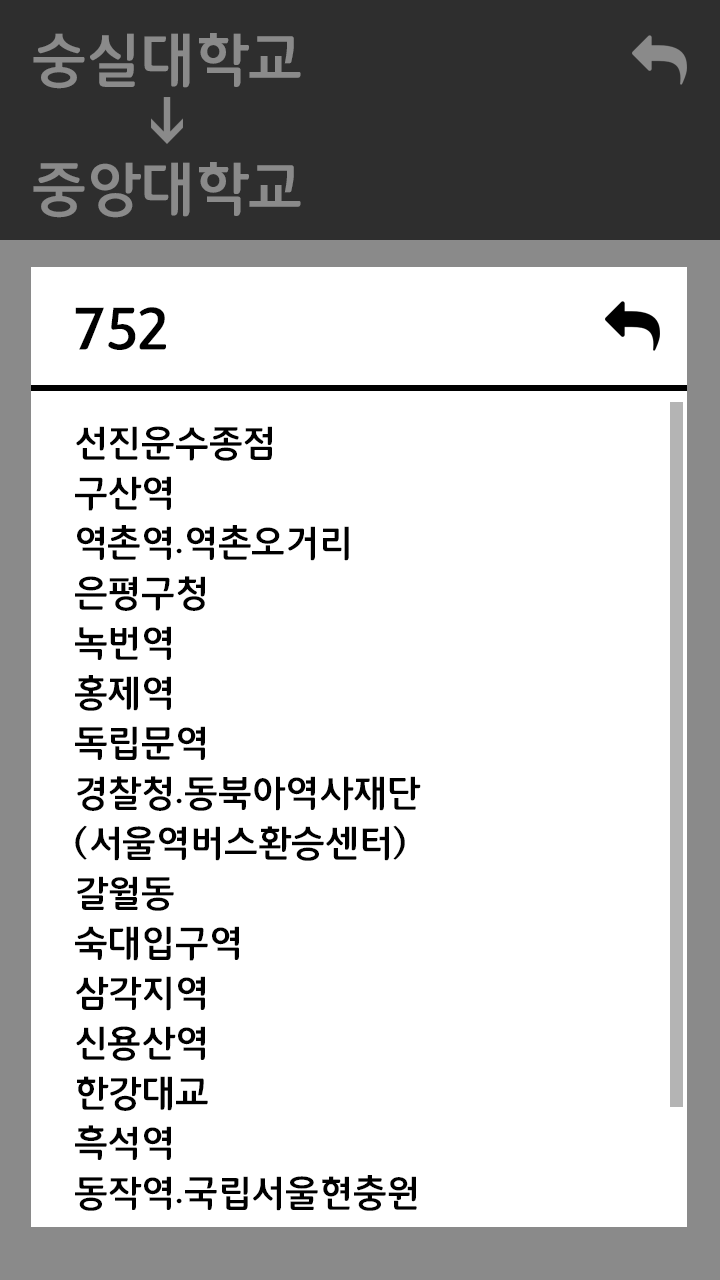
<style>
.page{position:relative;width:720px;height:1280px;background:#ffffff}
.page>*{position:absolute;margin:0}
.t1{font:60px "12LotteMartDreamBold";color:#8a8a8a}
.t2{font:60px "12LotteMartDreamBold";color:#000000}
.t3{font:37.5px/50px "12LotteMartDreamBold";color:#000000}
</style>
<div class="page">
<p class="t1" style="left:33px;top:33px;width:268px;height:56px">숭실대학교</p>
<p class="t1" style="left:33px;top:162px;width:268px;height:56px">중앙대학교</p>
<p class="t2" style="left:75px;top:307px;width:91px;height:43px">752</p>
<p class="t3" style="left:75px;top:426px;width:346px;height:785px">선진운수종점<br>구산역<br>역촌역.역촌오거리<br>은평구청<br>녹번역<br>홍제역<br>독립문역<br>경찰청.동북아역사재단<br>(서울역버스환승센터)<br>갈월동<br>숙대입구역<br>삼각지역<br>신용산역<br>한강대교<br>흑석역<br>동작역.국립서울현충원</p>
</div>
